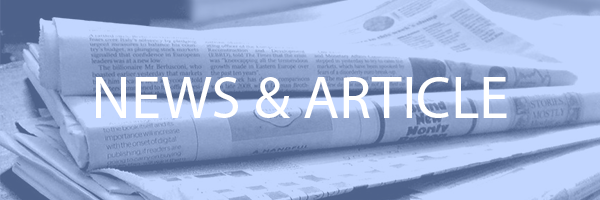
<style>
.page{position:relative;width:600px;height:200px;background:#c2d6ff}
.page>*{position:absolute;margin:0}
.t1{font:60px "MyriadPro-Regular";color:#ffffff}
</style>
<div class="page">
<p class="t1" style="left:96px;top:77px;width:411px;height:41px">NEWS &amp; ARTICLE</p>
</div>
